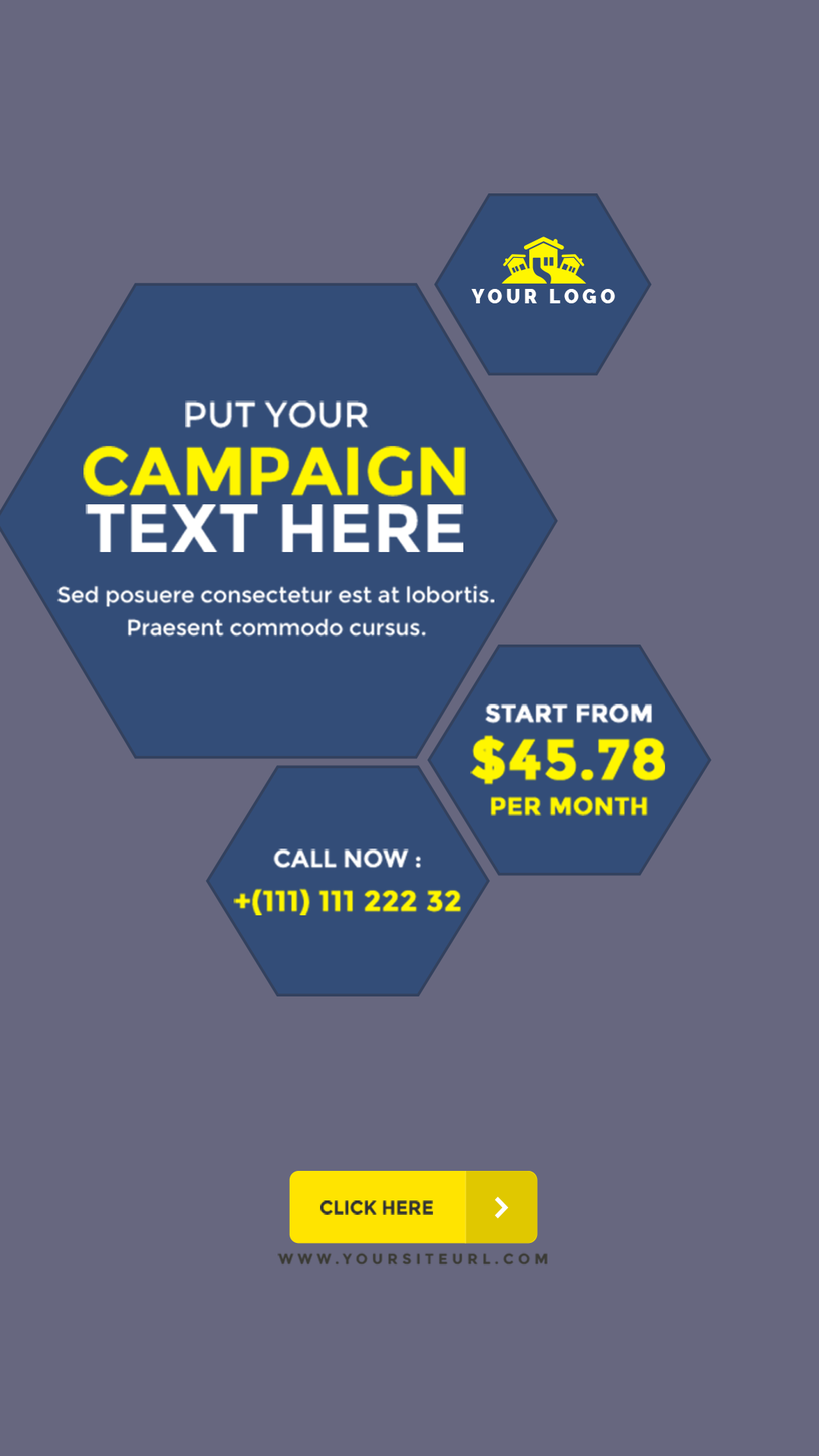
<style>
.page{position:relative;width:819px;height:1456px;background:#67677f}
.page>*{position:absolute;margin:0}
.t1{font:19px "Raleway-Black";letter-spacing:0.2em;color:#ffffff;text-transform:uppercase}
.t2{font:35.3px "Montserrat-Regular";color:#ffffff;text-transform:uppercase}
.t3{font:67.9px "Montserrat-Bold";color:#fff600;text-transform:uppercase}
.t4{font:67.9px "Montserrat-Bold";color:#ffffff;text-transform:uppercase}
.t5{font:21.7px/32.6px "Montserrat-Regular";color:#ffffff}
.t6{font:24.5px/57.1px "Montserrat-Bold";color:#ffffff;text-transform:uppercase;font-weight:bold}
.t7{font:57.1px/57.1px "Montserrat-Bold";color:#fff600;text-transform:uppercase;font-weight:bold}
.t8{font:24.5px/35.3px "Montserrat-Bold";color:#fff600;text-transform:uppercase;font-weight:bold}
.t9{font:28.5px/43.5px "Montserrat-Bold";color:#fff600;text-transform:uppercase;font-weight:bold}
.t10{font:24.5px/43.5px "Montserrat-Bold";color:#ffffff;text-transform:uppercase}
.t11{font:18.6px "Montserrat-Bold";color:#2f3135;text-transform:uppercase}
.t12{font:14.5px "Montserrat-Bold";letter-spacing:0.3em;color:#3a3a34;text-transform:uppercase}
</style>
<div class="page">
<p class="t1" style="left:471px;top:289px;width:144px;height:14px">your logo</p>
<p class="t2" style="left:185px;top:400px;width:184px;height:28px">put your</p>
<p class="t3" style="left:83px;top:446px;width:383px;height:51px">campaign</p>
<p class="t4" style="left:86px;top:504px;width:377px;height:48px">text here</p>
<p class="t5" style="left:57px;top:584px;width:437px;height:53px;text-align:center">Sed posuere consectetur est at lobortis. Praesent commodo cursus.</p>
<p class="t6" style="left:470px;top:704px;width:195px;height:112px;text-align:center">start from<br><span class="t7">$45.78<br></span><span class="t8">per month</span></p>
<p class="t9" style="left:234px;top:849px;width:227px;height:66px;text-align:center"><span class="t10">call now :<br></span>+(111) 111 222 32</p>
<p class="t11" style="left:320px;top:1200px;width:113px;height:15px">click here</p>
<p class="t12" style="left:278px;top:1252px;width:270px;height:14px">www.yoursiteurl.com</p>
</div>
